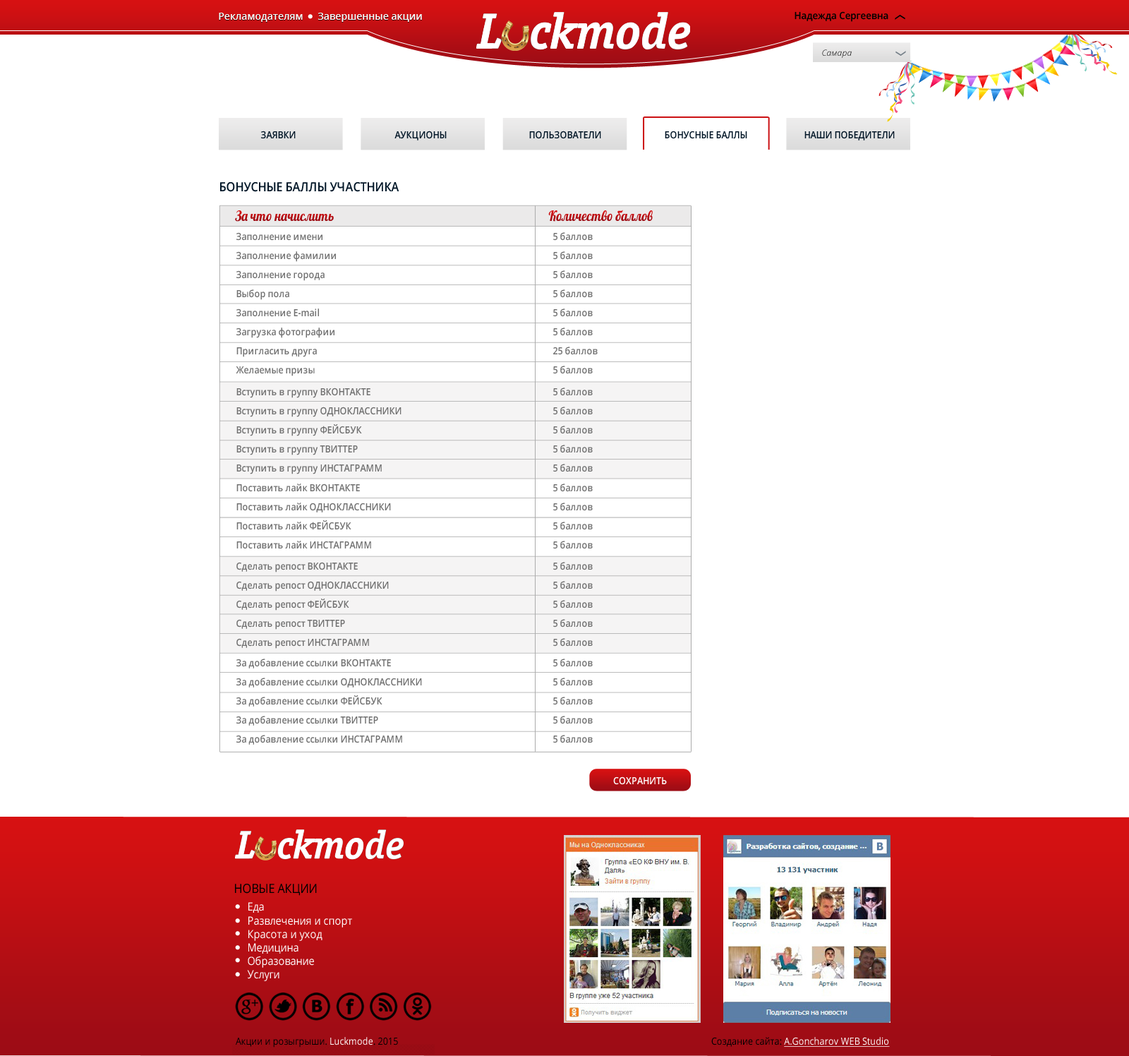
<style>
.page{position:relative;width:1129px;height:1056px;background:#ffffff}
.page>*{position:absolute;margin:0}
.t1{font:9.9px "OpenSans-Semibold";color:#fdfffc}
.t2{font:9.9px "OpenSans-Semibold";color:#ffffff}
.t3{font:9.9px "OpenSans-Semibold";color:#000100;scale:0.95 1}
.t4{font:8.5px "OpenSansLight-Italic"}
.t5{font:9.9px "OpenSans-Semibold";color:#011627;text-transform:uppercase;scale:0.9 1}
.t6{font:12.7px "OpenSans-Semibold";color:#011627;text-transform:uppercase;scale:0.9 1}
.t7{font:14.1px "Lobster";color:#b20e14;scale:0.9 1}
.t8{font:14.1px "Lobster";color:#ad0d14;scale:0.9 1}
.t9{font:9.9px/19.1px "OpenSans-Semibold";color:#707070;scale:0.9 1}
.t10{font:9.9px "OpenSans-Semibold";color:#ffffff;text-transform:uppercase;scale:0.9 1}
</style>
<div class="page">
<p class="t1" style="left:219px;top:13px;width:84px;height:9px">Рекламодателям</p>
<p class="t2" style="left:318px;top:13px;width:104px;height:9px">Завершенные акции</p>
<p class="t3" style="left:795px;top:11px;width:94px;height:11px">Надежда Сергеевна</p>
<p class="t4" style="left:822px;top:49px;width:30px;height:9px">Самара</p>
<p class="t5" style="left:261px;top:131px;width:35px;height:8px">заявки</p>
<p class="t5" style="left:395px;top:131px;width:52px;height:9px">аукционы</p>
<p class="t5" style="left:529px;top:131px;width:72px;height:8px">пользователи</p>
<p class="t5" style="left:665px;top:131px;width:82px;height:8px">бонусные баллы</p>
<p class="t5" style="left:805px;top:131px;width:90px;height:9px">наши победители</p>
<p class="t6" style="left:220px;top:182px;width:179px;height:10px">бонусные баллы участника</p>
<p class="t7" style="left:548px;top:210px;width:105px;height:12px">Количество баллов</p>
<p class="t8" style="left:235px;top:210px;width:99px;height:12px">За что начислить</p>
<p class="t9" style="left:236px;top:232px;width:100px;height:144px">Заполнение имени<br>Заполнение фамилии<br>Заполнение города<br>Выбор пола<br>Заполнение E-mail<br>Загрузка фотографии<br>Пригласить друга<br>Желаемые призы</p>
<p class="t9" style="left:553px;top:232px;width:45px;height:142px">5 баллов<br>5 баллов<br>5 баллов<br>5 баллов<br>5 баллов<br>5 баллов<br>25 баллов<br>5 баллов</p>
<p class="t9" style="left:236px;top:387px;width:166px;height:87px">Вступить в группу ВКОНТАКТЕ<br>Вступить в группу ОДНОКЛАССНИКИ<br>Вступить в группу ФЕЙСБУК<br>Вступить в группу ТВИТТЕР<br>Вступить в группу ИНСТАГРАММ</p>
<p class="t9" style="left:553px;top:387px;width:40px;height:85px">5 баллов<br>5 баллов<br>5 баллов<br>5 баллов<br>5 баллов</p>
<p class="t9" style="left:236px;top:483px;width:155px;height:66px">Поставить лайк ВКОНТАКТЕ<br>Поставить лайк ОДНОКЛАССНИКИ<br>Поставить лайк ФЕЙСБУК<br>Поставить лайк ИНСТАГРАММ</p>
<p class="t9" style="left:553px;top:483px;width:40px;height:66px">5 баллов<br>5 баллов<br>5 баллов<br>5 баллов</p>
<p class="t9" style="left:236px;top:562px;width:153px;height:87px">Сделать репост ВКОНТАКТЕ<br>Сделать репост ОДНОКЛАССНИКИ<br>Сделать репост ФЕЙСБУК<br>Сделать репост ТВИТТЕР<br>Сделать репост ИНСТАГРАММ</p>
<p class="t9" style="left:553px;top:562px;width:40px;height:85px">5 баллов<br>5 баллов<br>5 баллов<br>5 баллов<br>5 баллов</p>
<p class="t9" style="left:236px;top:659px;width:186px;height:86px">За добавление ссылки ВКОНТАКТЕ<br>За добавление ссылки ОДНОКЛАССНИКИ<br>За добавление ссылки ФЕЙСБУК<br>За добавление ссылки ТВИТТЕР<br>За добавление ссылки ИНСТАГРАММ</p>
<p class="t9" style="left:553px;top:659px;width:40px;height:84px">5 баллов<br>5 баллов<br>5 баллов<br>5 баллов<br>5 баллов</p>
<p class="t10" style="left:613px;top:776px;width:54px;height:9px">сохранить</p>
</div>
